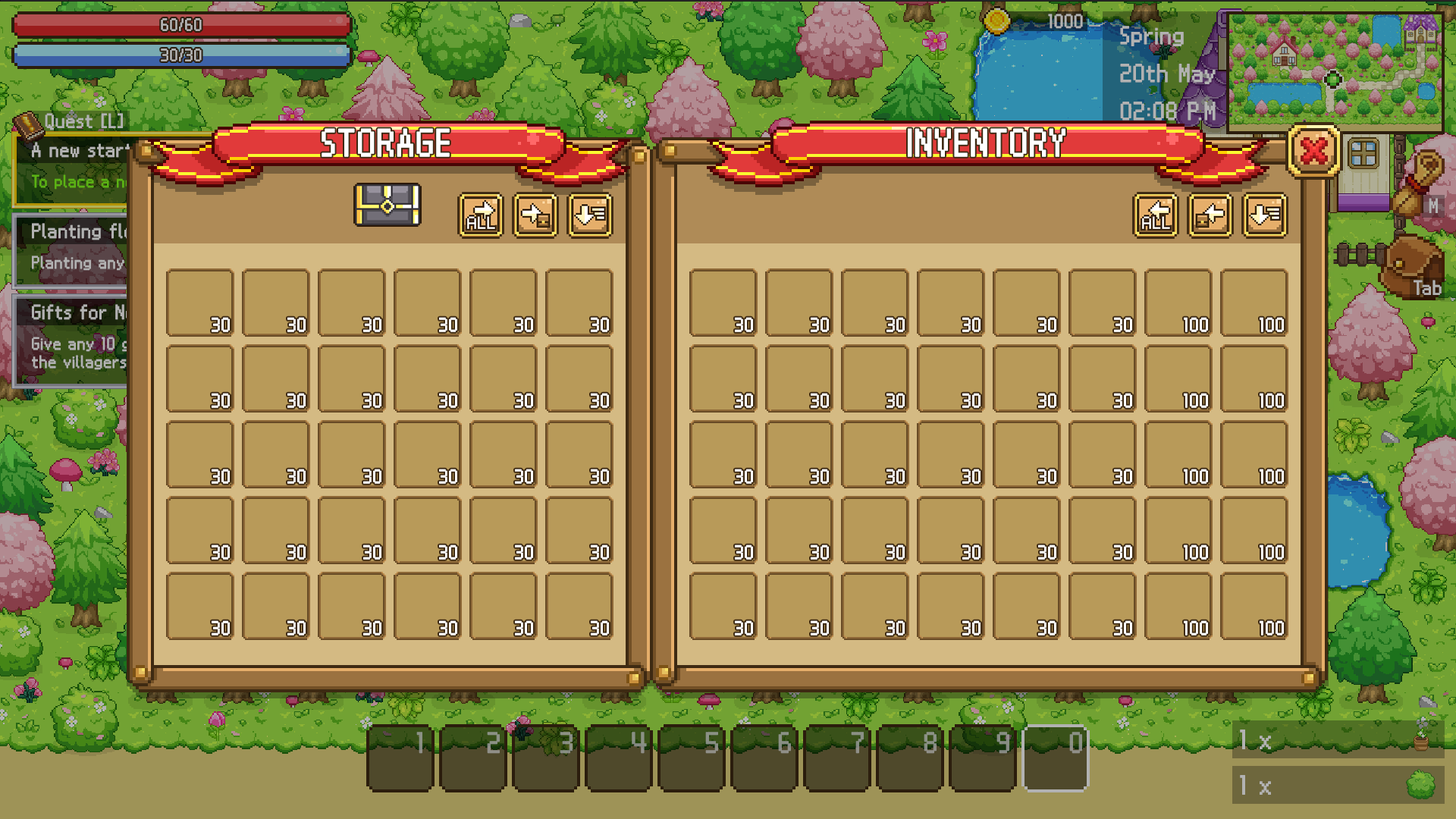
<style>
.page{position:relative;width:1456px;height:819px}
.page>*{position:absolute;margin:0}
.t1{font:30.3px "Galmuri9-Regular";letter-spacing:0.03em;color:#ffffff;text-transform:uppercase;font-weight:bold}
.t2{font:15.2px "Galmuri9-Regular";letter-spacing:0.03em;color:#ffffff;font-weight:bold}
</style>
<div class="page">
<p class="t1" style="left:322px;top:128px;width:128px;height:29px">Storage</p>
<p class="t1" style="left:908px;top:128px;width:157px;height:29px">Inventory</p>
<p class="t2" style="left:212px;top:317px;width:18px;height:15px">30</p>
<p class="t2" style="left:287px;top:317px;width:19px;height:15px">30</p>
<p class="t2" style="left:363px;top:317px;width:18px;height:15px">30</p>
<p class="t2" style="left:439px;top:317px;width:18px;height:15px">30</p>
<p class="t2" style="left:515px;top:317px;width:18px;height:15px">30</p>
<p class="t2" style="left:591px;top:317px;width:18px;height:15px">30</p>
<p class="t2" style="left:735px;top:317px;width:18px;height:15px">30</p>
<p class="t2" style="left:811px;top:317px;width:18px;height:15px">30</p>
<p class="t2" style="left:886px;top:317px;width:19px;height:15px">30</p>
<p class="t2" style="left:962px;top:317px;width:19px;height:15px">30</p>
<p class="t2" style="left:1038px;top:317px;width:18px;height:15px">30</p>
<p class="t2" style="left:1114px;top:317px;width:18px;height:15px">30</p>
<p class="t2" style="left:1184px;top:317px;width:24px;height:15px">100</p>
<p class="t2" style="left:1260px;top:317px;width:24px;height:15px">100</p>
<p class="t2" style="left:212px;top:393px;width:18px;height:15px">30</p>
<p class="t2" style="left:287px;top:393px;width:19px;height:15px">30</p>
<p class="t2" style="left:363px;top:393px;width:18px;height:15px">30</p>
<p class="t2" style="left:439px;top:393px;width:18px;height:15px">30</p>
<p class="t2" style="left:515px;top:393px;width:18px;height:15px">30</p>
<p class="t2" style="left:591px;top:393px;width:18px;height:15px">30</p>
<p class="t2" style="left:735px;top:393px;width:18px;height:15px">30</p>
<p class="t2" style="left:811px;top:393px;width:18px;height:15px">30</p>
<p class="t2" style="left:886px;top:393px;width:19px;height:15px">30</p>
<p class="t2" style="left:962px;top:393px;width:19px;height:15px">30</p>
<p class="t2" style="left:1038px;top:393px;width:18px;height:15px">30</p>
<p class="t2" style="left:1114px;top:393px;width:18px;height:15px">30</p>
<p class="t2" style="left:1184px;top:393px;width:24px;height:15px">100</p>
<p class="t2" style="left:1260px;top:393px;width:24px;height:15px">100</p>
<p class="t2" style="left:212px;top:469px;width:18px;height:15px">30</p>
<p class="t2" style="left:287px;top:469px;width:19px;height:15px">30</p>
<p class="t2" style="left:363px;top:469px;width:18px;height:15px">30</p>
<p class="t2" style="left:439px;top:469px;width:18px;height:15px">30</p>
<p class="t2" style="left:515px;top:469px;width:18px;height:15px">30</p>
<p class="t2" style="left:591px;top:469px;width:18px;height:15px">30</p>
<p class="t2" style="left:735px;top:469px;width:18px;height:15px">30</p>
<p class="t2" style="left:811px;top:469px;width:18px;height:15px">30</p>
<p class="t2" style="left:886px;top:469px;width:19px;height:15px">30</p>
<p class="t2" style="left:962px;top:469px;width:19px;height:15px">30</p>
<p class="t2" style="left:1038px;top:469px;width:18px;height:15px">30</p>
<p class="t2" style="left:1114px;top:469px;width:18px;height:15px">30</p>
<p class="t2" style="left:1184px;top:469px;width:24px;height:15px">100</p>
<p class="t2" style="left:1260px;top:469px;width:24px;height:15px">100</p>
<p class="t2" style="left:212px;top:544px;width:18px;height:16px">30</p>
<p class="t2" style="left:287px;top:544px;width:19px;height:16px">30</p>
<p class="t2" style="left:363px;top:544px;width:18px;height:16px">30</p>
<p class="t2" style="left:439px;top:544px;width:18px;height:16px">30</p>
<p class="t2" style="left:515px;top:544px;width:18px;height:16px">30</p>
<p class="t2" style="left:591px;top:544px;width:18px;height:16px">30</p>
<p class="t2" style="left:735px;top:544px;width:18px;height:16px">30</p>
<p class="t2" style="left:811px;top:544px;width:18px;height:16px">30</p>
<p class="t2" style="left:886px;top:544px;width:19px;height:16px">30</p>
<p class="t2" style="left:962px;top:544px;width:19px;height:16px">30</p>
<p class="t2" style="left:1038px;top:544px;width:18px;height:16px">30</p>
<p class="t2" style="left:1114px;top:544px;width:18px;height:16px">30</p>
<p class="t2" style="left:1184px;top:544px;width:24px;height:16px">100</p>
<p class="t2" style="left:1260px;top:544px;width:24px;height:16px">100</p>
<p class="t2" style="left:212px;top:620px;width:18px;height:15px">30</p>
<p class="t2" style="left:287px;top:620px;width:19px;height:15px">30</p>
<p class="t2" style="left:363px;top:620px;width:18px;height:15px">30</p>
<p class="t2" style="left:439px;top:620px;width:18px;height:15px">30</p>
<p class="t2" style="left:515px;top:620px;width:18px;height:15px">30</p>
<p class="t2" style="left:591px;top:620px;width:18px;height:15px">30</p>
<p class="t2" style="left:735px;top:620px;width:18px;height:15px">30</p>
<p class="t2" style="left:811px;top:620px;width:18px;height:15px">30</p>
<p class="t2" style="left:886px;top:620px;width:19px;height:15px">30</p>
<p class="t2" style="left:962px;top:620px;width:19px;height:15px">30</p>
<p class="t2" style="left:1038px;top:620px;width:18px;height:15px">30</p>
<p class="t2" style="left:1114px;top:620px;width:18px;height:15px">30</p>
<p class="t2" style="left:1184px;top:620px;width:24px;height:15px">100</p>
<p class="t2" style="left:1260px;top:620px;width:24px;height:15px">100</p>
</div>
